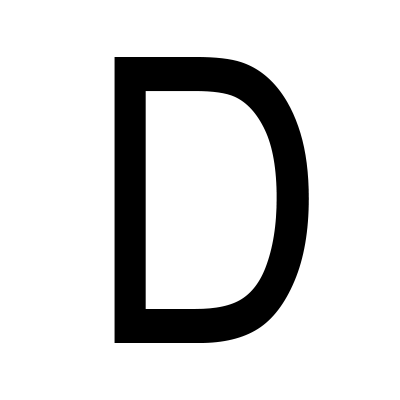
<style>
.page{position:relative;width:400px;height:400px;background:#ffffff}
.page>*{position:absolute;margin:0}
.t1{font:400px "ArialNarrow";color:#000000}
</style>
<div class="page">
<p class="t1" style="left:114px;top:57px;width:195px;height:286px">D</p>
</div>
